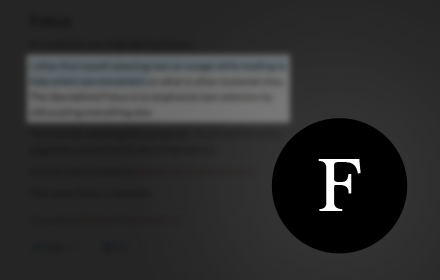
<style>
.page{position:relative;width:440px;height:280px}
.page>*{position:absolute;margin:0}
.t1{font:78.8px "Marion-Regular";color:#ffffff}
</style>
<div class="page">
<p class="t1" style="left:318px;top:159px;width:43px;height:52px">F</p>
</div>
